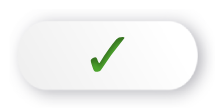
<style>
.page{position:relative;width:215px;height:108px;background:#ffffff}
.page>*{position:absolute;margin:0}
.t1{font:65px "DejaVuSans";color:#418c27}
</style>
<div class="page">
<p class="t1" style="left:90px;top:37px;width:35px;height:35px">✓</p>
</div>
